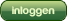
<style>
.page{position:relative;width:67px;height:21px}
.page>*{position:absolute;margin:0}
.t1{font:11px "Harabara-Bold";letter-spacing:0.04em;color:#eaf9c3;scale:1.1 1}
</style>
<div class="page">
<p class="t1" style="left:12px;top:6px;width:43px;height:11px">inloggen</p>
</div>
